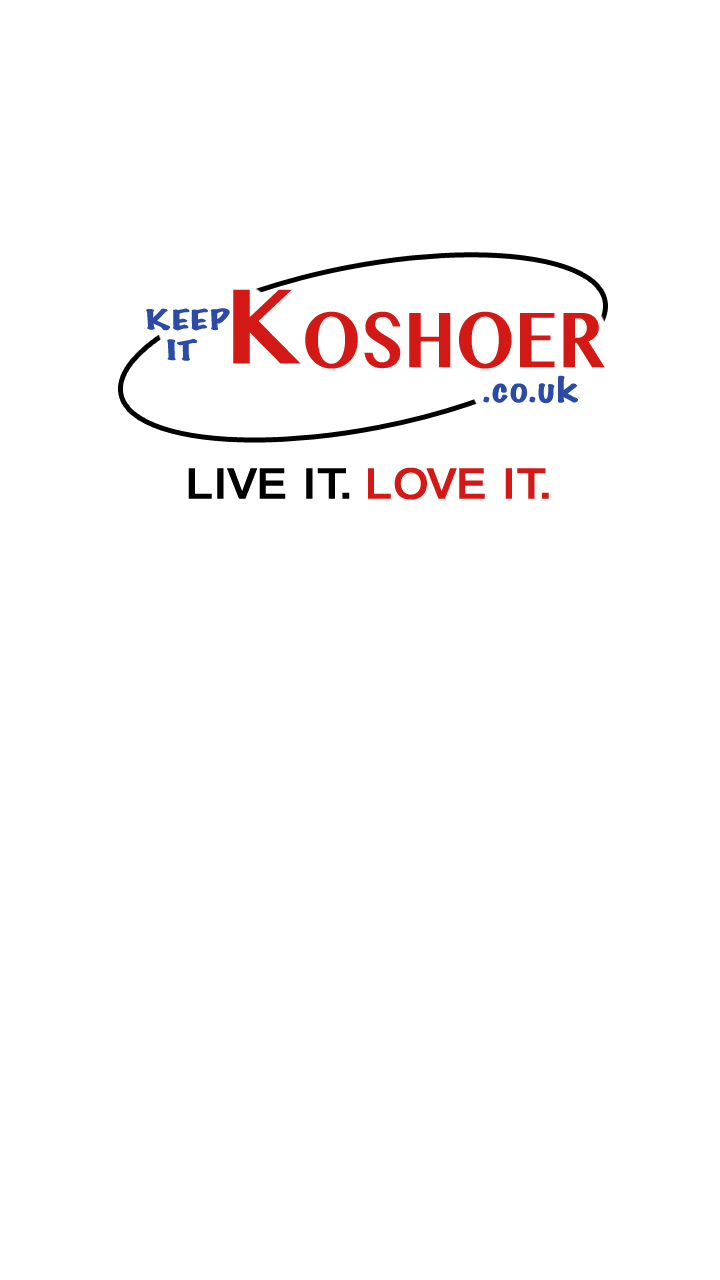
<style>
.page{position:relative;width:720px;height:1280px;background:#ffffff}
.page>*{position:absolute;margin:0}
.t1{font:105.7px "MyanmarMN-Bold";color:#d31915;scale:0.9 1}
.t2{font:25.3px "MarkerFelt-Thin";color:#2c4ba6;scale:1.71 1}
.t3{font:77.9px "MyanmarMN-Bold";color:#d31915;scale:0.84 1}
.t4{font:32.3px "MarkerFelt-Thin";color:#2c4ba6;scale:1.32 1}
.t5{font:43.8px "MyanmarSangamMN-Bold";color:#000000;scale:1.17 1}
.t6{font:43.8px "MyanmarSangamMN-Bold";color:#d31915;scale:1.17 1}
</style>
<div class="page">
<p class="t1" style="left:233px;top:289px;width:68px;height:75px">K</p>
<p class="t2" style="left:146px;top:308px;width:84px;height:53px;text-align:center">KEEP<br>IT</p>
<p class="t3" style="left:305px;top:311px;width:300px;height:58px">OSHOER</p>
<p class="t4" style="left:483px;top:375px;width:95px;height:29px">.co.uk</p>
<p class="t5" style="left:188px;top:467px;width:361px;height:33px">LIVE IT.<span class="t6"> LOVE IT.</span></p>
</div>
